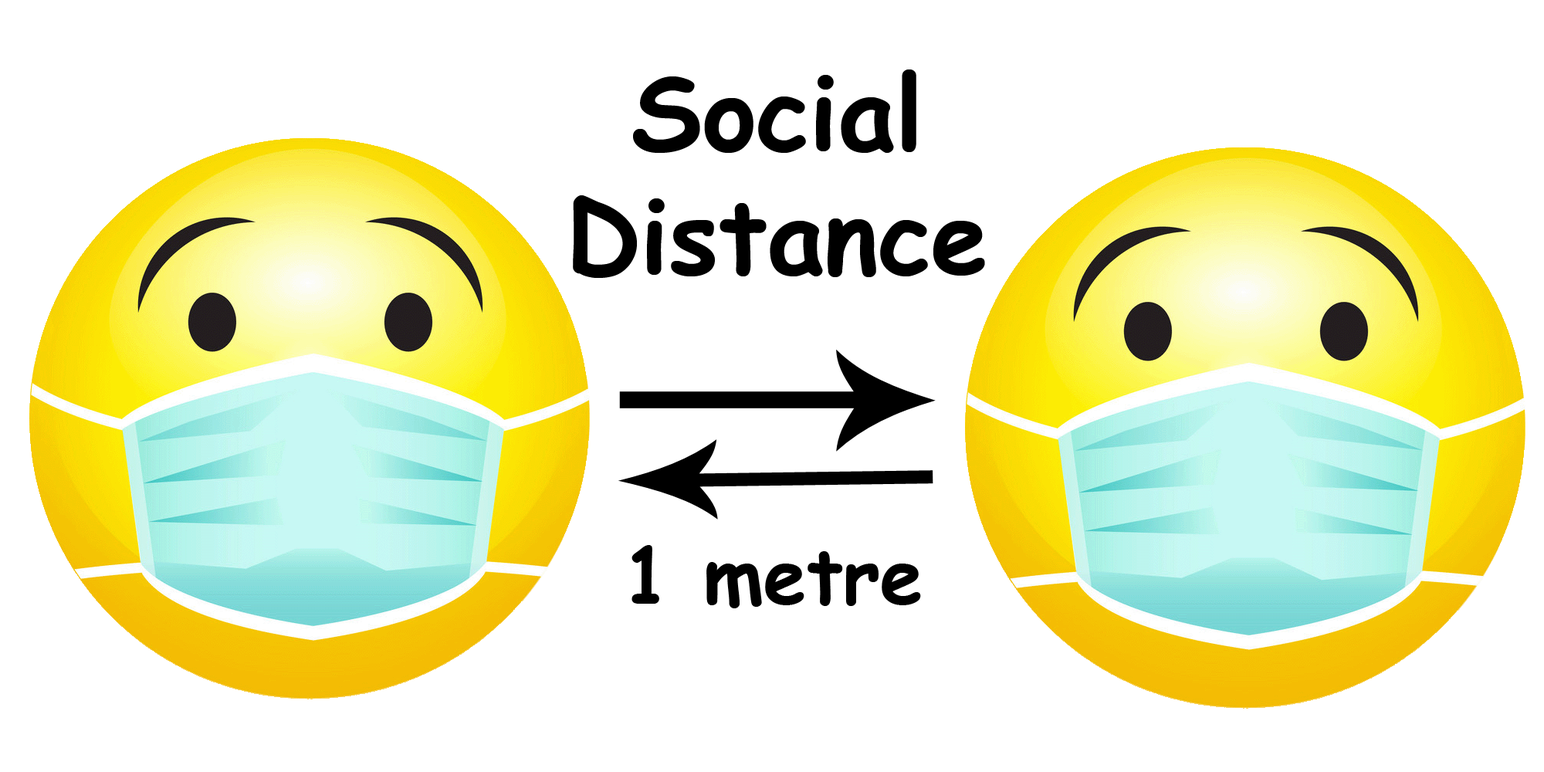
<style>
.page{position:relative;width:1544px;height:772px;background:#ffffff}
.page>*{position:absolute;margin:0}
.t1{font:103px "ComicSansMS-Bold";color:#000000}
.t2{font:77.2px "ComicSansMS-Bold";color:#000000}
</style>
<div class="page">
<p class="t1" style="left:573px;top:69px;width:412px;height:209px;text-align:center">Social<br>Distance</p>
<p class="t2" style="left:632px;top:545px;width:289px;height:63px">1 metre</p>
</div>
